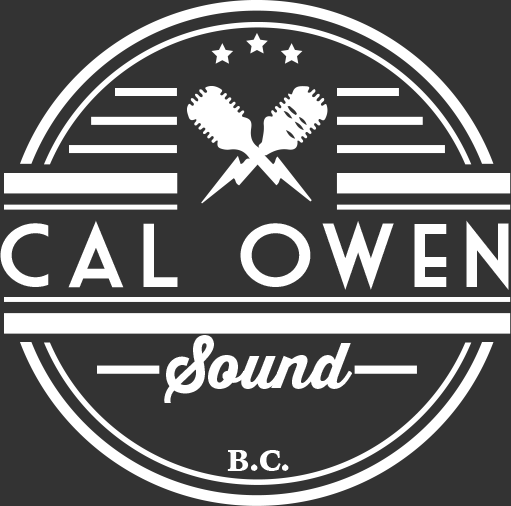
<style>
.page{position:relative;width:511px;height:506px;background:#333333}
.page>*{position:absolute;margin:0}
.t1{font:88px "MarketDeco";letter-spacing:0.1em;color:#ffffff;scale:1.07 1}
.t2{font:62.3px "ThirstyScriptExtraboldDemo";color:#ffffff;scale:0.96 1}
.t3{font:29.9px "IowanOldStyle-Black";color:#ffffff;scale:0.96 1}
</style>
<div class="page">
<p class="t1" style="left:0px;top:220px;width:509px;height:70px">Cal Owen</p>
<p class="t2" style="left:164px;top:335px;width:188px;height:68px">Sound</p>
<p class="t3" style="left:227px;top:450px;width:62px;height:21px">B.C.</p>
</div>
